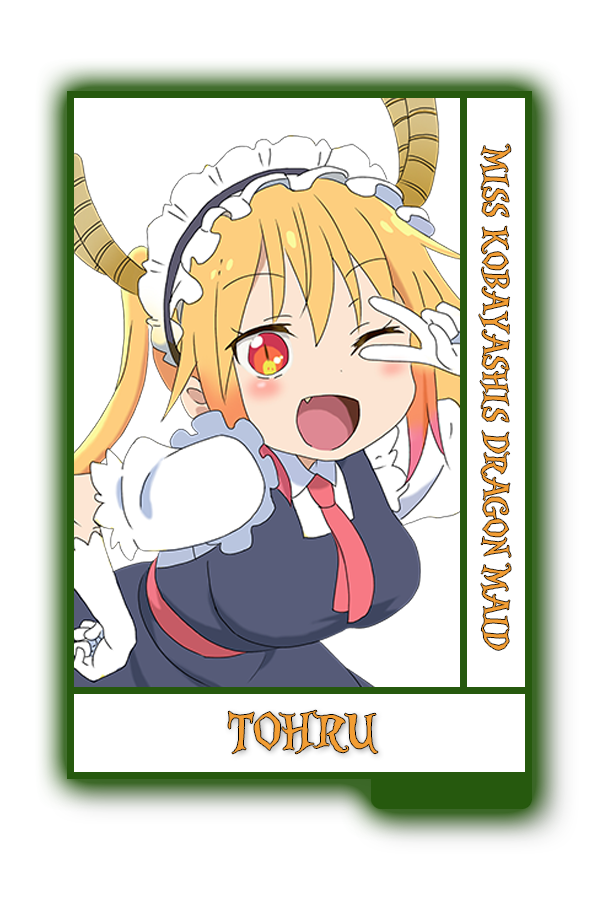
<style>
.page{position:relative;width:600px;height:900px;background:#ffffff}
.page>*{position:absolute;margin:0}
.t1{font:37.3px "AliceinWonderland";color:#f29d33}
.t2{font:56px "AliceinWonderland";color:#f29d33}
</style>
<div class="page">
<p class="t1" style="left:479px;top:144px;width:32px;height:506px;rotate:90deg">MISS KOBAYASHIS DRAGON MAID</p>
<p class="t2" style="left:228px;top:710px;width:150px;height:44px">TOHRU</p>
</div>
